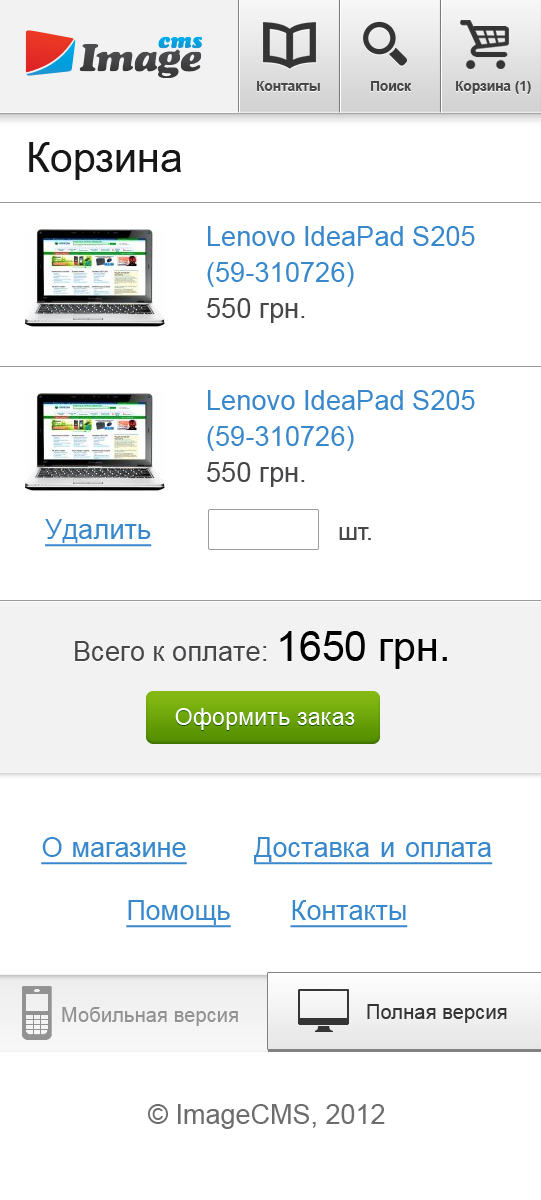
<style>
.page{position:relative;width:541px;height:1200px;background:#ffffff}
.page>*{position:absolute;margin:0}
.t1{font:13.6px "Arial-BoldMT";color:#474749}
.t2{font:40.9px "ArialMT";color:#171717}
.t3{font:27.3px/36px "ArialMT";color:#3a88cc}
.t4{font:27.3px/36px "ArialMT";color:#474749}
.t5{font:27.3px "ArialMT";color:#3a88cc;text-decoration:underline}
.t6{font:24.7px "ArialMT";color:#474749}
.t7{font:27.3px "ArialMT";color:#474749}
.t8{font:40.9px "ArialMT";color:#000000}
.t9{font:23px "ArialMT";letter-spacing:0.01em;color:#ffffff}
.t10{font:27px/63px "ArialMT";color:#3a88cc;text-decoration:underline}
.t11{font:20.3px "ArialMT";color:#929292}
.t12{font:20.3px "ArialMT";color:#343434}
.t13{font:27px "ArialMT";color:#6d6d6d}
</style>
<div class="page">
<p class="t1" style="left:257px;top:81px;width:63px;height:10px">Контакты</p>
<p class="t1" style="left:371px;top:81px;width:40px;height:10px">Поиск</p>
<p class="t1" style="left:456px;top:81px;width:75px;height:13px">Корзина (1)</p>
<p class="t2" style="left:29px;top:142px;width:152px;height:38px">Корзина</p>
<p class="t3" style="left:207px;top:226px;width:268px;height:97px">Lenovo IdeaPad S205 (59-310726)<br><span class="t4">550 грн.</span></p>
<p class="t3" style="left:207px;top:390px;width:268px;height:97px">Lenovo IdeaPad S205 (59-310726)<br><span class="t4">550 грн.</span></p>
<p class="t5" style="left:45px;top:519px;width:107px;height:28px">Удалить</p>
<p class="t6" style="left:339px;top:527px;width:32px;height:13px">шт.</p>
<p class="t7" style="left:75px;top:631px;width:372px;height:38px">Всего к оплате: <span class="t8">1650 грн.</span></p>
<p class="t9" style="left:175px;top:708px;width:180px;height:22px">Оформить заказ</p>
<p class="t10" style="left:41px;top:837px;width:452px;height:91px;text-align:center">Омагазине         Доставкаиоплата           <br>Помощь        Контакты</p>
<p class="t11" style="left:62px;top:1007px;width:176px;height:19px">Мобильная версия</p>
<p class="t12" style="left:367px;top:1004px;width:140px;height:19px">Полная версия</p>
<p class="t13" style="left:148px;top:1104px;width:237px;height:25px">© ImageCMS, 2012</p>
</div>
